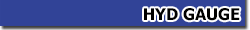
<style>
.page{position:relative;width:250px;height:30px;background:#314397}
.page>*{position:absolute;margin:0}
.t1{font:16px "Tahoma-Bold";color:#000000}
</style>
<div class="page">
<p class="t1" style="left:144px;top:8px;width:96px;height:13px">HYD GAUGE</p>
</div>
